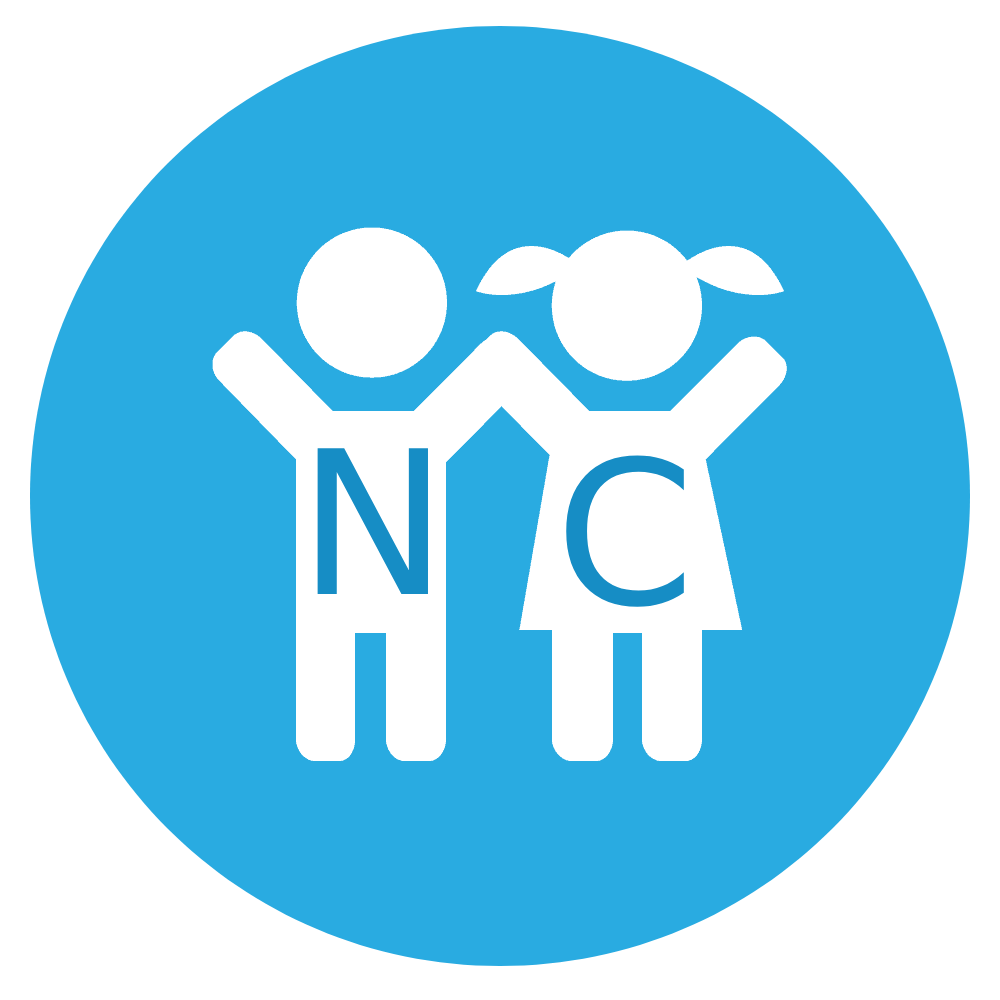
<style>
.page{position:relative;width:1000px;height:1000px;background:#29abe1}
.page>*{position:absolute;margin:0}
.t1{font:200px "DejaVuSans";color:#168dc5}
</style>
<div class="page">
<p class="t1" style="left:317px;top:448px;width:111px;height:146px">N</p>
<p class="t1" style="left:566px;top:455px;width:118px;height:152px">C</p>
</div>
